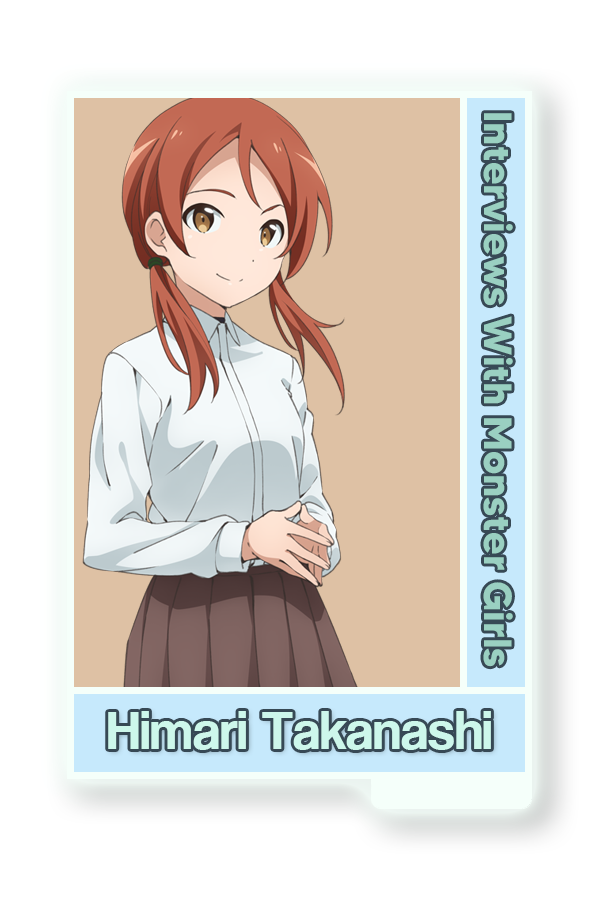
<style>
.page{position:relative;width:600px;height:900px;background:#ffffff}
.page>*{position:absolute;margin:0}
.t1{font:39.2px "MADETOMMY-Bold";color:#9ad0c1}
.t2{font:56.1px "CoolveticaRg-Regular";color:#cdf7eb}
</style>
<div class="page">
<p class="t1" style="left:483px;top:113px;width:30px;height:554px;rotate:90deg">Interviews With Monster Girls</p>
<p class="t2" style="left:108px;top:711px;width:383px;height:39px">Himari Takanashi</p>
</div>
